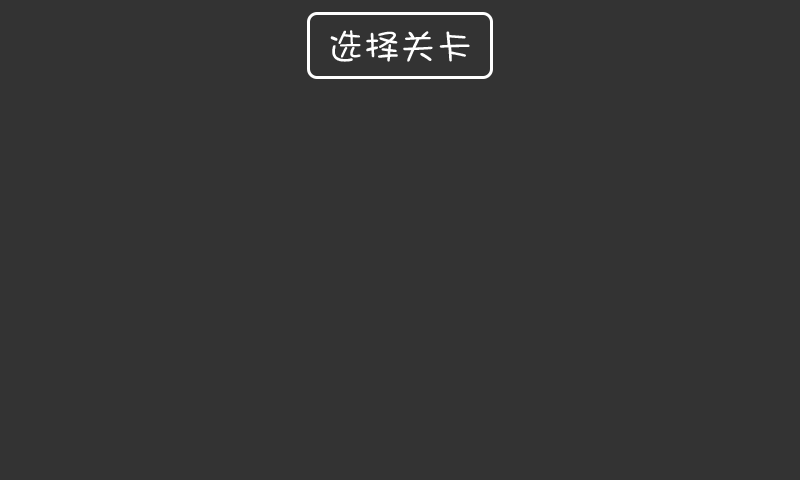
<style>
.page{position:relative;width:800px;height:480px;background:#333333}
.page>*{position:absolute;margin:0}
.t1{font:36px "DFShaoNvW5";color:#ffffff}
</style>
<div class="page">
<p class="t1" style="left:330px;top:30px;width:140px;height:32px">选择关卡</p>
</div>
